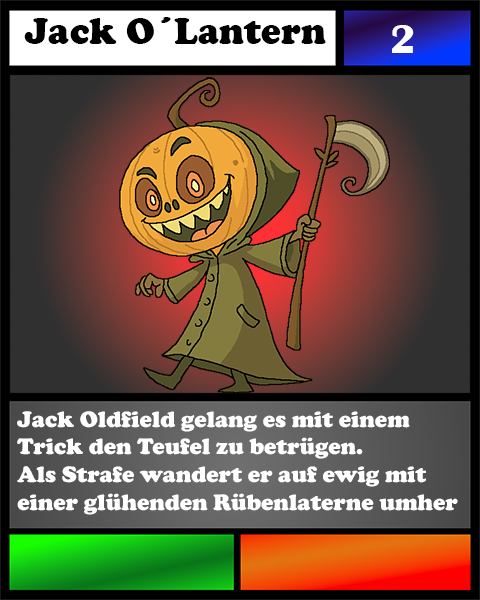
<style>
.page{position:relative;width:480px;height:600px}
.page>*{position:absolute;margin:0}
.t1{font:37.5px "CooperBlack";color:#000000}
.t2{font:41.7px "BritannicBold";color:#ffffff}
.t3{font:23.1px "CooperBlack";color:#ffffff}
</style>
<div class="page">
<p class="t1" style="left:24px;top:17px;width:302px;height:27px">Jack O´Lantern</p>
<p class="t2" style="left:392px;top:25px;width:22px;height:28px">2</p>
<p class="t3" style="left:17px;top:411px;width:441px;height:104px">Jack Oldfield gelang es mit einem<br>Trick den Teufel zu betrügen.<br>Als Strafe wandert er auf ewig mit einer glühenden Rübenlaterne umher</p>
</div>
